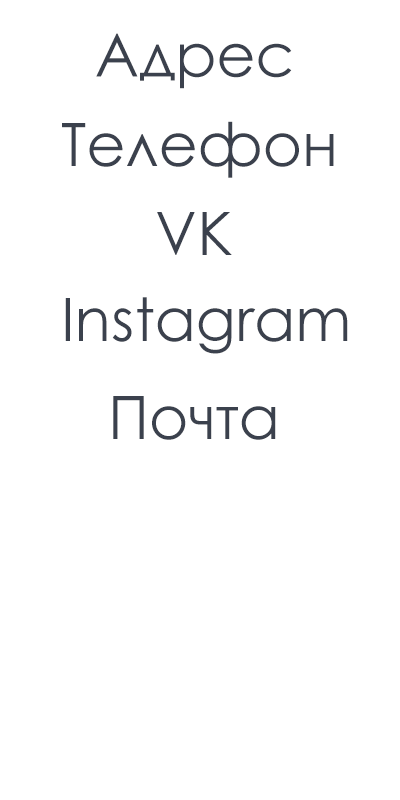
<style>
.page{position:relative;width:400px;height:800px;background:#ffffff}
.page>*{position:absolute;margin:0}
.t1{font:60px "CenturyGothic";color:#3b414d}
</style>
<div class="page">
<p class="t1" style="left:96px;top:33px;width:196px;height:56px">Адрес</p>
<p class="t1" style="left:62px;top:121px;width:272px;height:57px">Телефон</p>
<p class="t1" style="left:157px;top:212px;width:75px;height:43px">VK</p>
<p class="t1" style="left:65px;top:297px;width:283px;height:57px">Instagram</p>
<p class="t1" style="left:113px;top:396px;width:163px;height:44px">Почта</p>
</div>
